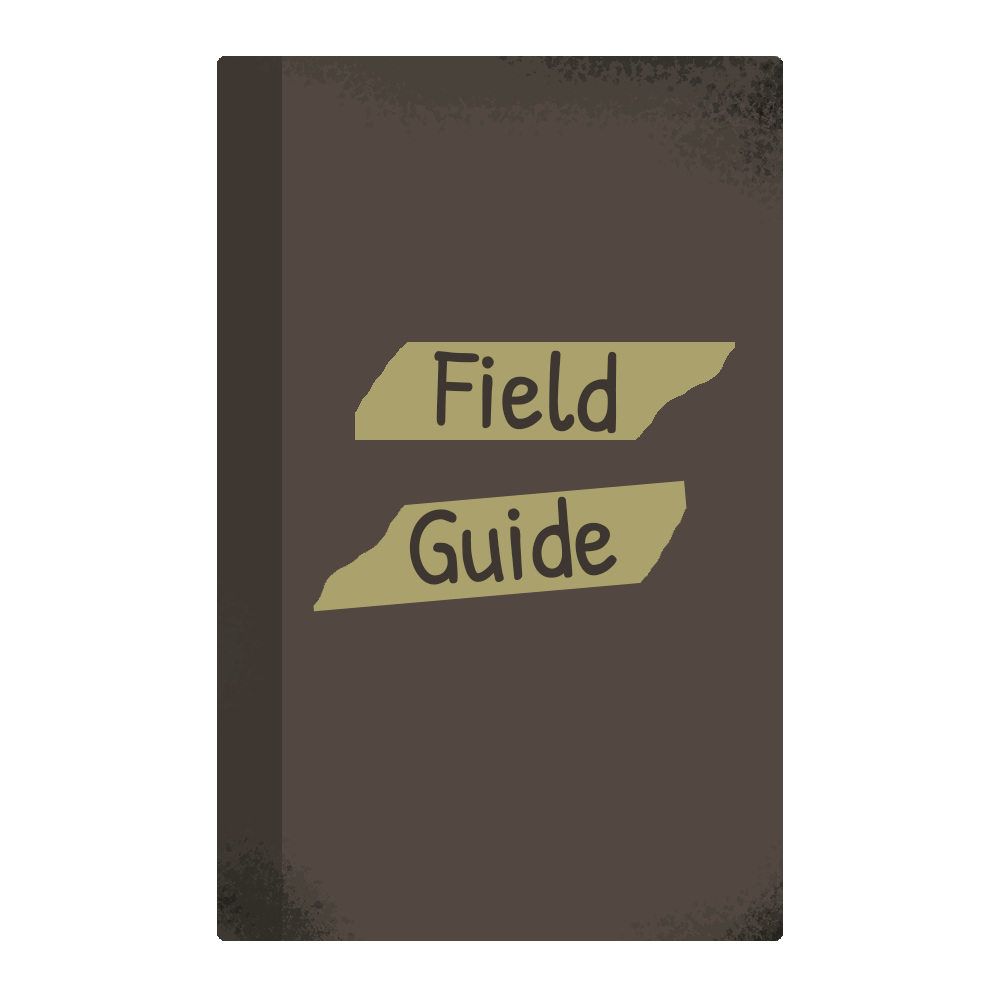
<style>
.page{position:relative;width:1000px;height:1000px;background:#ffffff}
.page>*{position:absolute;margin:0}
.t1{font:112.5px "PatrickHand-Regular";color:#3e3631}
</style>
<div class="page">
<p class="t1" style="left:434px;top:350px;width:183px;height:84px;rotate:2deg">Field</p>
<p class="t1" style="left:409px;top:496px;width:208px;height:89px;rotate:-3deg">Guide</p>
</div>
